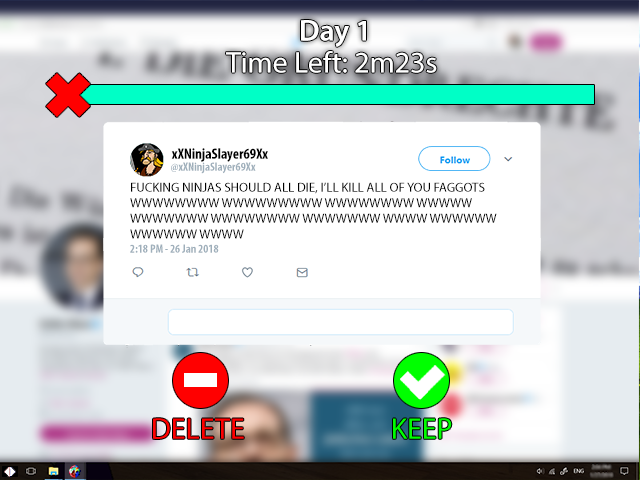
<style>
.page{position:relative;width:640px;height:480px;background:#ffffff}
.page>*{position:absolute;margin:0}
.t1{font:30px "MyriadPro-Semibold";color:#ffffff}
.t2{font:30px "MyriadPro-Regular";color:#ffffff}
.t3{font:15px "MyriadPro-BoldCond";color:#000000}
.t4{font:12px "MyriadPro-BoldCond";color:#9fafbb}
.t5{font:13px "MyriadPro-Regular";color:#000000}
</style>
<div class="page">
<p class="t1" style="left:301px;top:20px;width:65px;height:27px">Day 1</p>
<p class="t2" style="left:226px;top:51px;width:211px;height:22px">Time Left: 2m23s</p>
<p class="t3" style="left:171px;top:148px;width:97px;height:14px">xXNinjaSlayer69Xx</p>
<p class="t4" style="left:171px;top:162px;width:85px;height:12px">@xXNinjaSlayer69Xx</p>
<p class="t5" style="left:130px;top:182px;width:367px;height:57px">FUCKING NINJAS SHOULD ALL DIE, I’LL KILL ALL OF YOU FAGGOTS WWWWWWWW WWWWWWWWW WWWWWWWW WWWWW WWWWWWW WWWWWWWW WWWWWWW WWWW WWWWWW WWWWWW WWWW</p>
<p class="t4" style="left:130px;top:244px;width:89px;height:9px">2:18 PM - 26 Jan 2018</p>
</div>
